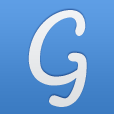
<style>
.page{position:relative;width:114px;height:114px}
.page>*{position:absolute;margin:0}
.t1{font:80.4px "Pacifico";color:#f1f3f5}
</style>
<div class="page">
<p class="t1" style="left:28px;top:10px;width:59px;height:97px">G</p>
</div>
